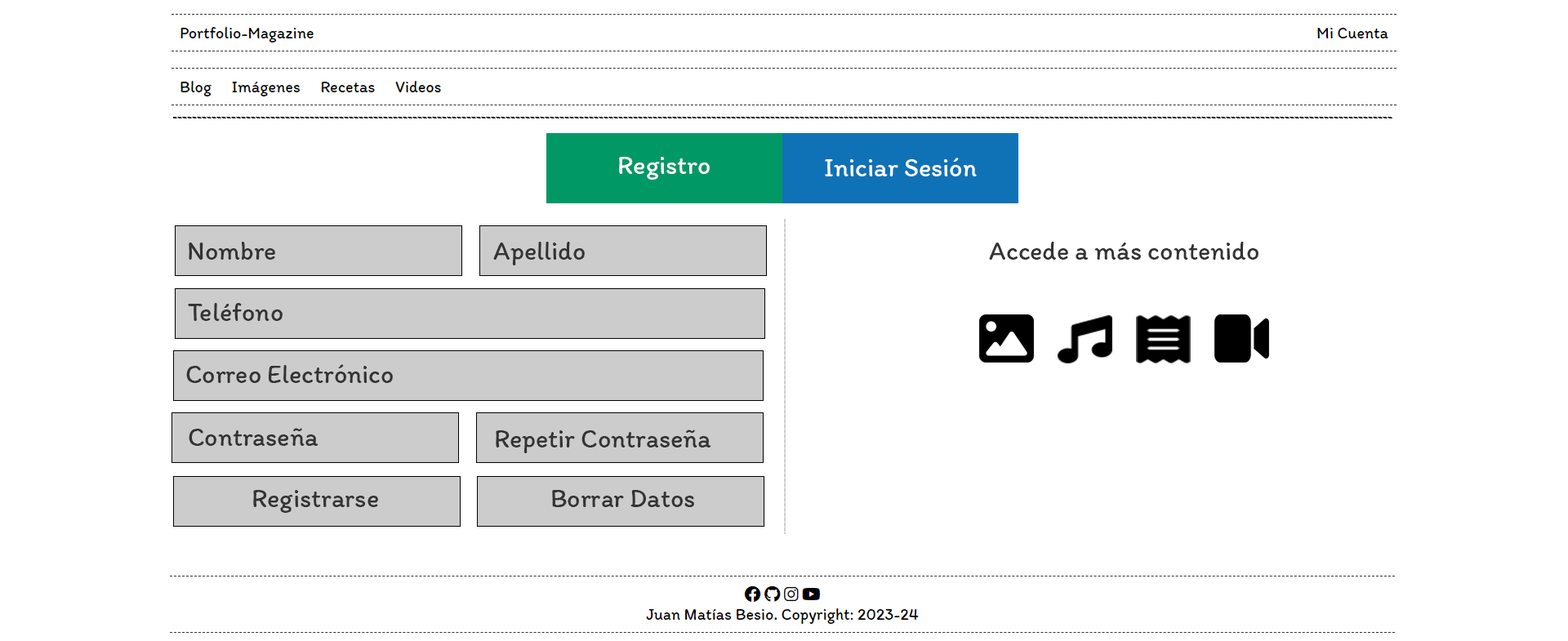
<style>
.page{position:relative;width:1568px;height:641px;background:#ffffff}
.page>*{position:absolute;margin:0}
.t1{font:26.1px "Itim-Regular";color:#fefefe}
.t2{font:26.1px "Itim-Regular";color:#333333}
</style>
<div class="page">
<p class="t1" style="left:619px;top:157px;width:91px;height:23px">Registro</p>
<p class="t1" style="left:825px;top:158px;width:152px;height:18px">Iniciar Sesión</p>
<p class="t2" style="left:189px;top:242px;width:86px;height:18px">Nombre</p>
<p class="t2" style="left:493px;top:242px;width:92px;height:23px">Apellido</p>
<p class="t2" style="left:989px;top:242px;width:269px;height:18px">Accede a más contenido</p>
<p class="t2" style="left:188px;top:303px;width:95px;height:18px">Teléfono</p>
<p class="t2" style="left:186px;top:364px;width:207px;height:19px">Correo Electrónico</p>
<p class="t2" style="left:189px;top:428px;width:129px;height:18px">Contraseña</p>
<p class="t2" style="left:496px;top:430px;width:215px;height:23px">Repetir Contraseña</p>
<p class="t2" style="left:253px;top:490px;width:125px;height:23px">Registrarse</p>
<p class="t2" style="left:552px;top:490px;width:142px;height:17px">Borrar Datos</p>
</div>
